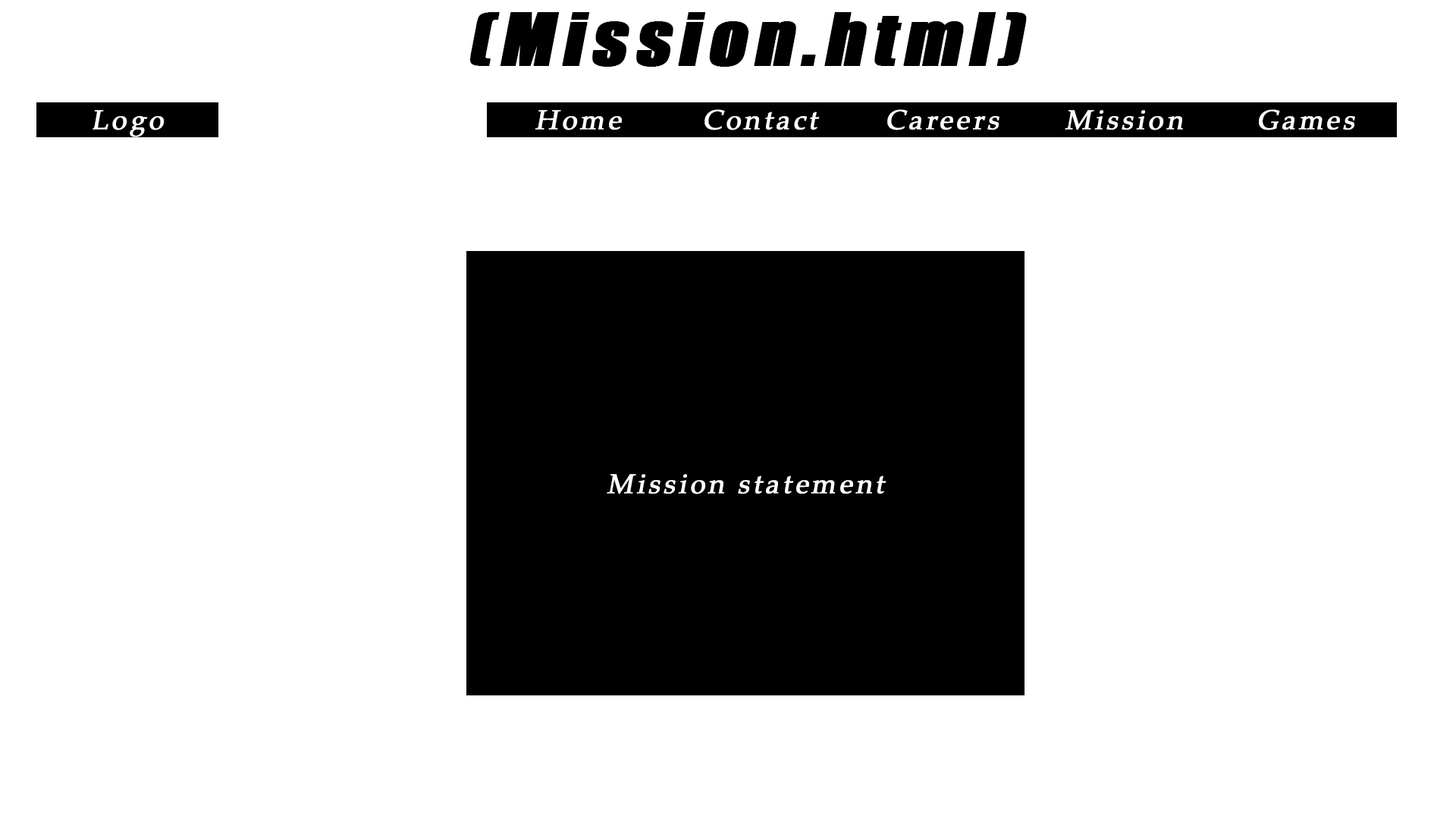
<style>
.page{position:relative;width:1456px;height:819px;background:#ffffff}
.page>*{position:absolute;margin:0}
.t1{font:66.7px "Impact";letter-spacing:0.1em;color:#000000;font-weight:bold;font-style:italic;scale:1.09 1}
.t2{font:27.3px "PalatinoLinotype-Roman";letter-spacing:0.1em;color:#ffffff;font-weight:bold;font-style:italic}
</style>
<div class="page">
<p class="t1" style="left:470px;top:12px;width:557px;height:55px">(Mission.html)</p>
<p class="t2" style="left:93px;top:110px;width:72px;height:27px">Logo</p>
<p class="t2" style="left:535px;top:110px;width:87px;height:20px">Home</p>
<p class="t2" style="left:704px;top:109px;width:116px;height:21px">Contact</p>
<p class="t2" style="left:887px;top:109px;width:112px;height:21px">Careers</p>
<p class="t2" style="left:1065px;top:110px;width:118px;height:20px">Mission</p>
<p class="t2" style="left:1259px;top:109px;width:96px;height:21px">Games</p>
<p class="t2" style="left:607px;top:474px;width:279px;height:20px">Mission statement</p>
</div>
